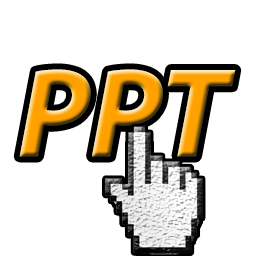
<style>
.page{position:relative;width:256px;height:256px;background:#ffffff}
.page>*{position:absolute;margin:0}
.t1{font:128px "MyriadHebrew-BoldIt"}
</style>
<div class="page">
<p class="t1" style="left:19px;top:69px;width:217px;height:88px">PPT</p>
</div>
